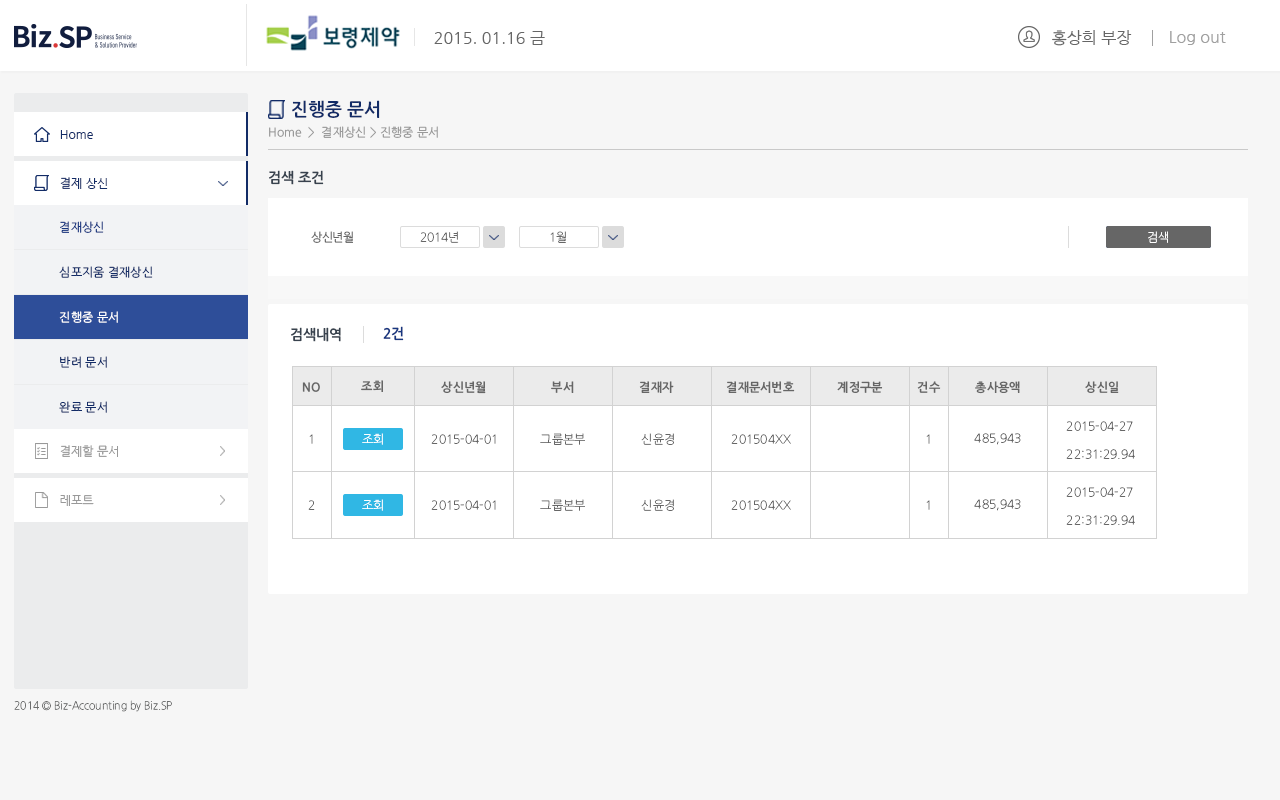
<style>
.page{position:relative;width:1280px;height:800px;background:#ffffff}
.page>*{position:absolute;margin:0}
.t1{font:16px "NanumGothic";color:#666666}
.t2{font:16px "NanumGothic";color:#a0a0a0}
.t3{font:18px "NanumGothicOTFBold";color:#122b66}
.t4{font:12px "NanumGothicOTF";color:#999999}
.t5{font:12px "NanumGothic";color:#122b66}
.t6{font:14px "NanumGothicOTFBold";color:#38424e}
.t7{font:12px "NanumGothicOTF";color:#173680}
.t8{font:12px "NanumGothicOTF";letter-spacing:-0.025em;color:#666666}
.t9{font:12px "NanumGothicOTFLight";letter-spacing:-0.025em;color:#666666}
.t10{font:12px "NanumGothicOTFLight";letter-spacing:-0.025em;color:#ffffff}
.t11{font:12px "NanumGothicOTF";color:#122b66}
.t12{font:12px "NanumGothicOTF";color:#ffffff}
.t13{font:14px "NanumGothicOTFBold";color:#173680}
.t14{font:12px "NanumGothicOTFBold";color:#666666}
.t15{font:12px/28.1px "NanumGothicOTFLight";color:#666666}
.t16{font:12px "NanumGothicOTFLight";color:#666666}
.t17{font:12px "NanumGothic";color:#999999}
.t18{font:11px "NanumGothicOTFLight";color:#6c6d6d;scale:0.94 1}
</style>
<div class="page">
<p class="t1" style="left:1052px;top:30px;width:80px;height:16px">홍상희 부장</p>
<p class="t1" style="left:434px;top:31px;width:111px;height:14px">2015. 01.16 금</p>
<p class="t2" style="left:1170px;top:31px;width:56px;height:14px">Log out</p>
<p class="t3" style="left:292px;top:100px;width:88px;height:18px">진행중 문서</p>
<p class="t4" style="left:269px;top:126px;width:169px;height:12px">Home  &gt;  결재상신 &gt; 진행중 문서</p>
<p class="t5" style="left:60px;top:130px;width:33px;height:9px">Home</p>
<p class="t5" style="left:60px;top:130px;width:33px;height:9px">Home</p>
<p class="t6" style="left:269px;top:170px;width:55px;height:15px">검색 조건</p>
<p class="t5" style="left:60px;top:177px;width:48px;height:12px">결제 상신</p>
<p class="t7" style="left:60px;top:221px;width:44px;height:12px">결재상신</p>
<p class="t8" style="left:311px;top:231px;width:42px;height:12px">상신년월</p>
<p class="t9" style="left:420px;top:231px;width:39px;height:12px">2014년</p>
<p class="t9" style="left:550px;top:231px;width:16px;height:12px">1월</p>
<p class="t10" style="left:1148px;top:231px;width:20px;height:12px">검색</p>
<p class="t10" style="left:1148px;top:231px;width:20px;height:12px">검색</p>
<p class="t11" style="left:59px;top:266px;width:94px;height:12px">심포지움 결재상신</p>
<p class="t12" style="left:59px;top:311px;width:59px;height:12px">진행중 문서</p>
<p class="t6" style="left:291px;top:327px;width:50px;height:15px">검색내역</p>
<p class="t13" style="left:383px;top:326px;width:21px;height:15px">2건</p>
<p class="t11" style="left:60px;top:356px;width:47px;height:12px">반려 문서</p>
<p class="t14" style="left:302px;top:382px;width:18px;height:10px">NO</p>
<p class="t14" style="left:361px;top:380px;width:22px;height:12px">조회</p>
<p class="t14" style="left:441px;top:381px;width:45px;height:13px">상신년월</p>
<p class="t14" style="left:551px;top:381px;width:23px;height:12px">부서</p>
<p class="t14" style="left:639px;top:381px;width:35px;height:12px">결재자</p>
<p class="t14" style="left:726px;top:381px;width:69px;height:12px">결재문서번호</p>
<p class="t14" style="left:837px;top:381px;width:46px;height:12px">계정구분</p>
<p class="t14" style="left:917px;top:381px;width:24px;height:12px">건수</p>
<p class="t14" style="left:975px;top:381px;width:45px;height:13px">총사용액</p>
<p class="t14" style="left:1085px;top:381px;width:34px;height:12px">상신일</p>
<p class="t11" style="left:59px;top:401px;width:48px;height:12px">완료 문서</p>
<p class="t15" style="left:1066px;top:421px;width:69px;height:38px">2015-04-27<br>22:31:29.94</p>
<p class="t16" style="left:309px;top:434px;width:4px;height:10px">1</p>
<p class="t10" style="left:362px;top:433px;width:21px;height:12px">조회</p>
<p class="t16" style="left:431px;top:434px;width:65px;height:10px">2015-04-01</p>
<p class="t16" style="left:431px;top:434px;width:65px;height:10px">2015-04-01</p>
<p class="t16" style="left:540px;top:433px;width:45px;height:12px">그룹본부</p>
<p class="t16" style="left:641px;top:433px;width:33px;height:12px">신윤경</p>
<p class="t16" style="left:731px;top:434px;width:60px;height:10px">201504XX</p>
<p class="t16" style="left:926px;top:434px;width:4px;height:10px">1</p>
<p class="t16" style="left:974px;top:433px;width:47px;height:12px">485,943</p>
<p class="t17" style="left:60px;top:445px;width:58px;height:12px">결제할 문서</p>
<p class="t17" style="left:60px;top:445px;width:58px;height:12px">결제할 문서</p>
<p class="t17" style="left:60px;top:495px;width:34px;height:11px">레포트</p>
<p class="t17" style="left:60px;top:495px;width:34px;height:11px">레포트</p>
<p class="t15" style="left:1066px;top:487px;width:69px;height:38px">2015-04-27<br>22:31:29.94</p>
<p class="t16" style="left:308px;top:500px;width:7px;height:10px">2</p>
<p class="t10" style="left:362px;top:499px;width:21px;height:12px">조회</p>
<p class="t16" style="left:431px;top:500px;width:65px;height:10px">2015-04-01</p>
<p class="t16" style="left:431px;top:500px;width:65px;height:10px">2015-04-01</p>
<p class="t16" style="left:540px;top:499px;width:45px;height:12px">그룹본부</p>
<p class="t16" style="left:641px;top:499px;width:33px;height:12px">신윤경</p>
<p class="t16" style="left:731px;top:500px;width:60px;height:10px">201504XX</p>
<p class="t16" style="left:926px;top:500px;width:4px;height:10px">1</p>
<p class="t16" style="left:974px;top:499px;width:47px;height:12px">485,943</p>
<p class="t18" style="left:14px;top:700px;width:158px;height:12px">2014 © Biz-Accounting by Biz.SP</p>
</div>
